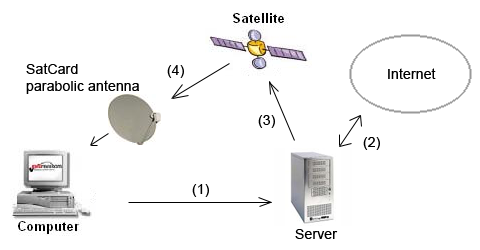
<style>
.page{position:relative;width:480px;height:250px;background:#ffffff}
.page>*{position:absolute;margin:0}
.t1{font:14px "ArialMT";letter-spacing:0.01em;color:#000000}
</style>
<div class="page">
<p class="t1" style="left:26px;top:63px;width:113px;height:31px">SatCard<br>parabolic antenna</p>
<p class="t1" style="left:167px;top:65px;width:17px;height:13px">(4)</p>
<p class="t1" style="left:388px;top:68px;width:48px;height:11px">Internet</p>
<p class="t1" style="left:258px;top:115px;width:17px;height:13px">(3)</p>
<p class="t1" style="left:363px;top:137px;width:17px;height:13px">(2)</p>
<p class="t1" style="left:192px;top:184px;width:17px;height:13px">(1)</p>
</div>
